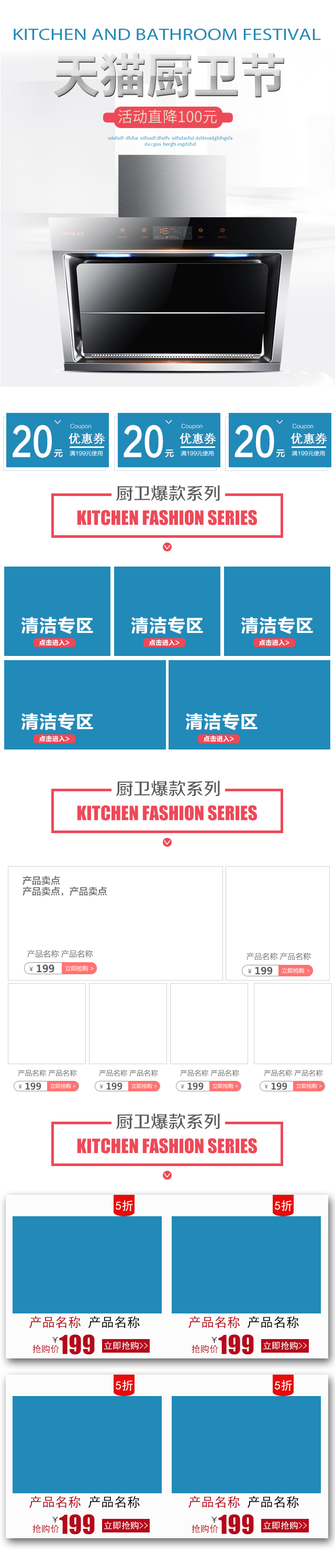
<style>
.page{position:relative;width:335px;height:1568px;background:#ffffff}
.page>*{position:absolute;margin:0}
.t1{font:16.6px "MyriadPro-Regular";color:#218ab8;text-transform:uppercase;scale:1.23 1}
.t2{font:15px "SourceHanSansCN-Regular";color:#e2d5c0}
.t3{font:39.1px "FZLTZHK--GBK1-0";color:#ffffff;scale:0.82 1}
.t4{font:9.6px "FZLTHJW--GB1-0";color:#ffffff;scale:0.65 1}
.t5{font:5.8px "FZZDXJW--GB1-0"}
.t6{font:5.8px "FZZDXJW--GB1-0";color:#ffffff}
.t7{font:11.7px "FZZDXJW--GB1-0";color:#ffffff;font-weight:bold}
.t8{font:8.8px "FZLTZHK--GBK1-0";color:#ffffff}
.t9{font:5.5px "FZLTHJW--GB1-0";color:#ffffff;scale:1.03 1}
.t10{font:17.4px "FZZZHUNHJW--GB1-0";color:#595959}
.t11{font:18.4px "Impact";color:#ee4958;text-transform:uppercase}
.t12{font:9.3px "FZZZHUNHJW--GB1-0";color:#ffffff;scale:0.76 1}
.t13{font:18.3px "FZLTCHJW--GB1-0";color:#ffffff;text-transform:uppercase}
.t14{font:6.6px "FZLTCHJW--GB1-0";color:#ffffff;text-transform:uppercase}
.t15{font:6.3px "FZLTCHJW--GB1-0";color:#ffffff}
.t16{font:9.4px/10.8px "FZLTZHK--GBK1-0";color:#656565}
.t17{font:7.9px "FZLTHJW--GB1-0";color:#656565}
.t18{font:7.7px "FZLTHJW--GB1-0";color:#656565}
.t19{font:10.1px "MicrosoftYaHei-Bold";color:#5d5d5d}
.t20{font:6.3px "MicrosoftYaHei";color:#656565}
.t21{font:5.8px "MicrosoftYaHei";color:#ffffff}
.t22{font:9.9px "MicrosoftYaHei-Bold";color:#5d5d5d}
.t23{font:6.1px "MicrosoftYaHei";color:#656565}
.t24{font:5.6px "MicrosoftYaHei";color:#ffffff}
.t25{font:7.1px "FZLTHJW--GB1-0";color:#656565}
.t26{font:9.1px "MicrosoftYaHei-Bold";color:#5d5d5d}
.t27{font:5.7px "MicrosoftYaHei";color:#656565}
.t28{font:5.2px "MicrosoftYaHei";color:#ffffff}
.t29{font:11.9px "SimHei";letter-spacing:0.01em;color:#ffffff}
.t30{font:12.9px "SimHei";letter-spacing:0.01em;color:#b5091a}
.t31{font:12.9px "SimHei";letter-spacing:0.01em;color:#000000}
.t32{font:9px "SimHei";letter-spacing:0.01em;color:#000000}
.t33{font:24.3px "Impact";letter-spacing:0.01em;color:#b5091a}
.t34{font:9px "SimHei";letter-spacing:0.01em;color:#b5091a}
.t35{font:8.8px "SimHei";letter-spacing:0.01em;color:#ffffff}
</style>
<div class="page">
<p class="t1" style="left:14px;top:28px;width:306px;height:12px">Kitchen and bathroom Festival</p>
<p class="t2" style="left:118px;top:109px;width:98px;height:14px">活动直降100元</p>
<p class="t3" style="left:13px;top:425px;width:39px;height:33px">20</p>
<p class="t4" style="left:54px;top:420px;width:7px;height:4px;rotate:90deg">&gt;</p>
<p class="t5" style="left:70px;top:424px;width:21px;height:6px">Coupon</p>
<p class="t3" style="left:123px;top:425px;width:40px;height:33px">20</p>
<p class="t4" style="left:165px;top:420px;width:7px;height:4px;rotate:90deg">&gt;</p>
<p class="t5" style="left:181px;top:424px;width:21px;height:6px">Coupon</p>
<p class="t3" style="left:234px;top:425px;width:40px;height:33px">20</p>
<p class="t4" style="left:276px;top:420px;width:7px;height:4px;rotate:90deg">&gt;</p>
<p class="t6" style="left:292px;top:424px;width:21px;height:6px">Coupon</p>
<p class="t7" style="left:68px;top:433px;width:37px;height:11px">优惠券</p>
<p class="t7" style="left:179px;top:433px;width:37px;height:11px">优惠券</p>
<p class="t7" style="left:290px;top:433px;width:37px;height:11px">优惠券</p>
<p class="t8" style="left:54px;top:449px;width:9px;height:8px">元</p>
<p class="t8" style="left:165px;top:449px;width:9px;height:8px">元</p>
<p class="t8" style="left:276px;top:449px;width:8px;height:8px">元</p>
<p class="t9" style="left:70px;top:451px;width:32px;height:5px">满199元使用</p>
<p class="t9" style="left:180px;top:451px;width:33px;height:5px">满199元使用</p>
<p class="t9" style="left:291px;top:451px;width:34px;height:5px">满199元使用</p>
<p class="t10" style="left:116px;top:485px;width:104px;height:16px">厨卫爆款系列</p>
<p class="t11" style="left:77px;top:510px;width:180px;height:15px">Kitchen fashion series</p>
<p class="t12" style="left:164px;top:545px;width:6px;height:4px;rotate:90deg">&gt;</p>
<p class="t13" style="left:21px;top:617px;width:72px;height:17px">清洁专区</p>
<p class="t13" style="left:131px;top:617px;width:72px;height:17px">清洁专区</p>
<p class="t13" style="left:240px;top:617px;width:73px;height:17px">清洁专区</p>
<p class="t14" style="left:39px;top:639px;width:31px;height:6px">点击进入<span class="t15">&gt;</span></p>
<p class="t14" style="left:149px;top:639px;width:30px;height:6px">点击进入<span class="t15">&gt;</span></p>
<p class="t14" style="left:259px;top:639px;width:30px;height:6px">点击进入<span class="t15">&gt;</span></p>
<p class="t13" style="left:21px;top:713px;width:72px;height:17px">清洁专区</p>
<p class="t13" style="left:185px;top:713px;width:72px;height:17px">清洁专区</p>
<p class="t14" style="left:39px;top:735px;width:31px;height:7px">点击进入<span class="t15">&gt;</span></p>
<p class="t14" style="left:203px;top:735px;width:31px;height:7px">点击进入<span class="t15">&gt;</span></p>
<p class="t10" style="left:116px;top:780px;width:104px;height:17px">厨卫爆款系列</p>
<p class="t11" style="left:77px;top:805px;width:180px;height:16px">Kitchen fashion series</p>
<p class="t12" style="left:164px;top:840px;width:6px;height:5px;rotate:90deg">&gt;</p>
<p class="t16" style="left:22px;top:876px;width:85px;height:20px">产品卖点<br>产品卖点，产品卖点</p>
<p class="t17" style="left:27px;top:950px;width:66px;height:8px">产品名称 产品名称</p>
<p class="t18" style="left:246px;top:953px;width:64px;height:7px">产品名称 产品名称</p>
<p class="t19" style="left:29px;top:964px;width:25px;height:9px"><span class="t20">￥ </span>199</p>
<p class="t21" style="left:65px;top:965px;width:29px;height:6px">立即抢购 &gt;</p>
<p class="t22" style="left:248px;top:966px;width:24px;height:9px"><span class="t23">￥ </span>199</p>
<p class="t24" style="left:281px;top:967px;width:28px;height:7px">立即抢购 &gt;</p>
<p class="t25" style="left:18px;top:1069px;width:59px;height:8px">产品名称 产品名称</p>
<p class="t25" style="left:99px;top:1069px;width:59px;height:8px">产品名称 产品名称</p>
<p class="t25" style="left:180px;top:1069px;width:59px;height:8px">产品名称 产品名称</p>
<p class="t25" style="left:263px;top:1069px;width:59px;height:8px">产品名称 产品名称</p>
<p class="t26" style="left:18px;top:1082px;width:23px;height:8px"><span class="t27">￥ </span>199</p>
<p class="t28" style="left:50px;top:1083px;width:26px;height:6px">立即抢购 &gt;</p>
<p class="t26" style="left:99px;top:1082px;width:23px;height:8px"><span class="t27">￥ </span>199</p>
<p class="t28" style="left:131px;top:1083px;width:26px;height:6px">立即抢购 &gt;</p>
<p class="t26" style="left:180px;top:1082px;width:23px;height:8px"><span class="t27">￥ </span>199</p>
<p class="t28" style="left:212px;top:1083px;width:26px;height:6px">立即抢购 &gt;</p>
<p class="t26" style="left:264px;top:1082px;width:23px;height:8px"><span class="t27">￥ </span>199</p>
<p class="t28" style="left:296px;top:1083px;width:25px;height:6px">立即抢购 &gt;</p>
<p class="t10" style="left:116px;top:1113px;width:104px;height:16px">厨卫爆款系列</p>
<p class="t11" style="left:77px;top:1138px;width:180px;height:16px">Kitchen fashion series</p>
<p class="t12" style="left:164px;top:1173px;width:6px;height:5px;rotate:90deg">&gt;</p>
<p class="t29" style="left:116px;top:1200px;width:17px;height:11px">5折</p>
<p class="t29" style="left:274px;top:1200px;width:18px;height:11px">5折</p>
<p class="t30" style="left:29px;top:1316px;width:111px;height:12px">产品名称<span class="t31"> 产品名称</span></p>
<p class="t30" style="left:188px;top:1316px;width:110px;height:12px">产品名称<span class="t31"> 产品名称</span></p>
<p class="t32" style="left:52px;top:1337px;width:6px;height:6px">￥</p>
<p class="t33" style="left:59px;top:1334px;width:36px;height:21px">199</p>
<p class="t32" style="left:211px;top:1337px;width:6px;height:6px">￥</p>
<p class="t33" style="left:218px;top:1334px;width:35px;height:21px">199</p>
<p class="t34" style="left:32px;top:1345px;width:27px;height:8px">抢购价</p>
<p class="t35" style="left:104px;top:1341px;width:44px;height:9px">立即抢购&gt;&gt;</p>
<p class="t34" style="left:191px;top:1345px;width:27px;height:8px">抢购价</p>
<p class="t35" style="left:263px;top:1341px;width:44px;height:9px">立即抢购&gt;&gt;</p>
<p class="t29" style="left:116px;top:1380px;width:17px;height:11px">5折</p>
<p class="t29" style="left:274px;top:1380px;width:18px;height:11px">5折</p>
<p class="t30" style="left:29px;top:1496px;width:111px;height:12px">产品名称<span class="t31"> 产品名称</span></p>
<p class="t30" style="left:188px;top:1496px;width:110px;height:12px">产品名称<span class="t31"> 产品名称</span></p>
<p class="t32" style="left:52px;top:1517px;width:6px;height:6px">￥</p>
<p class="t33" style="left:59px;top:1514px;width:36px;height:21px">199</p>
<p class="t32" style="left:211px;top:1517px;width:6px;height:6px">￥</p>
<p class="t33" style="left:218px;top:1514px;width:35px;height:21px">199</p>
<p class="t34" style="left:32px;top:1525px;width:27px;height:8px">抢购价</p>
<p class="t35" style="left:104px;top:1521px;width:44px;height:9px">立即抢购&gt;&gt;</p>
<p class="t34" style="left:191px;top:1525px;width:27px;height:8px">抢购价</p>
<p class="t35" style="left:263px;top:1521px;width:44px;height:9px">立即抢购&gt;&gt;</p>
</div>
